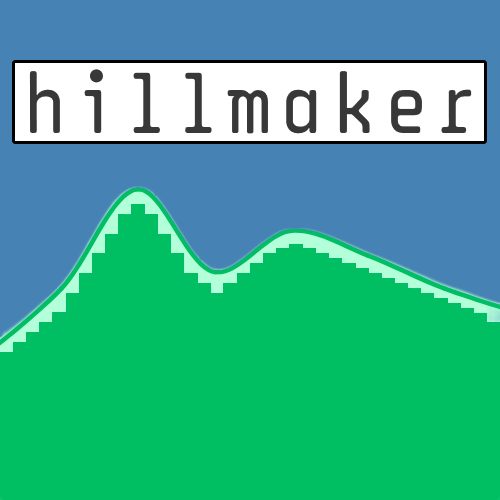
<style>
.page{position:relative;width:500px;height:500px;background:#00bf63}
.page>*{position:absolute;margin:0}
.t1{font:86px "DPSDbeyond";color:#383838}
</style>
<div class="page">
<p class="t1" style="left:29px;top:69px;width:443px;height:65px">hillmaker</p>
</div>
